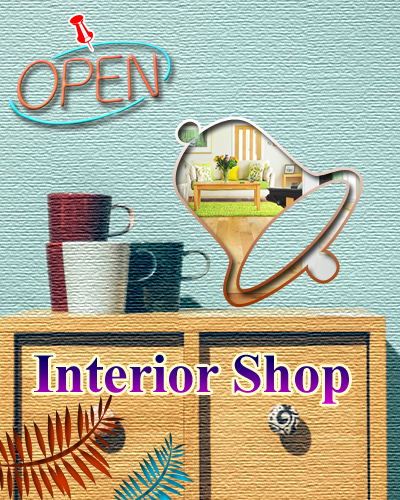
<style>
.page{position:relative;width:400px;height:500px}
.page>*{position:absolute;margin:0}
.t1{font:55px "TimesNewRomanPS-BoldMT"}
</style>
<div class="page">
<p class="t1" style="left:34px;top:354px;width:315px;height:50px">Interior Shop</p>
</div>
